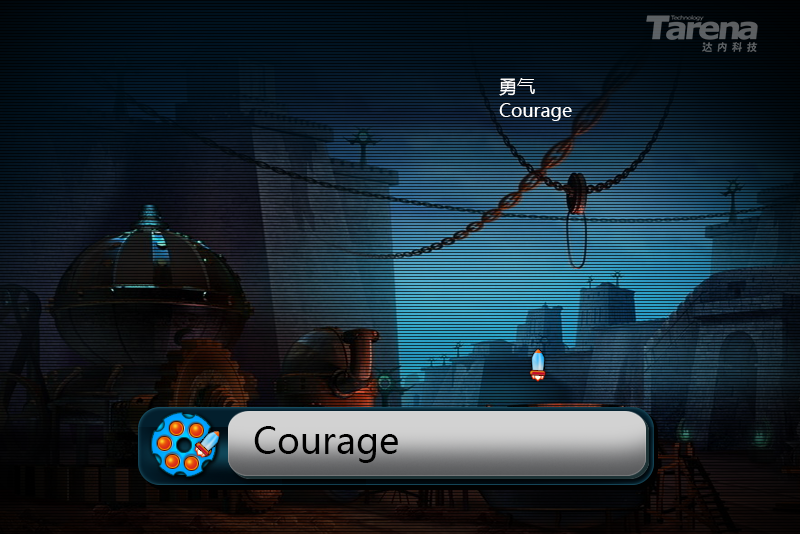
<style>
.page{position:relative;width:800px;height:534px}
.page>*{position:absolute;margin:0}
.t1{font:18px/24px "MicrosoftYaHei";color:#ffffff}
.t2{font:36px "MicrosoftYaHei";color:#000000}
</style>
<div class="page">
<p class="t1" style="left:499px;top:78px;width:73px;height:43px">勇气<br>Courage</p>
<p class="t2" style="left:254px;top:426px;width:144px;height:37px">Courage</p>
</div>
